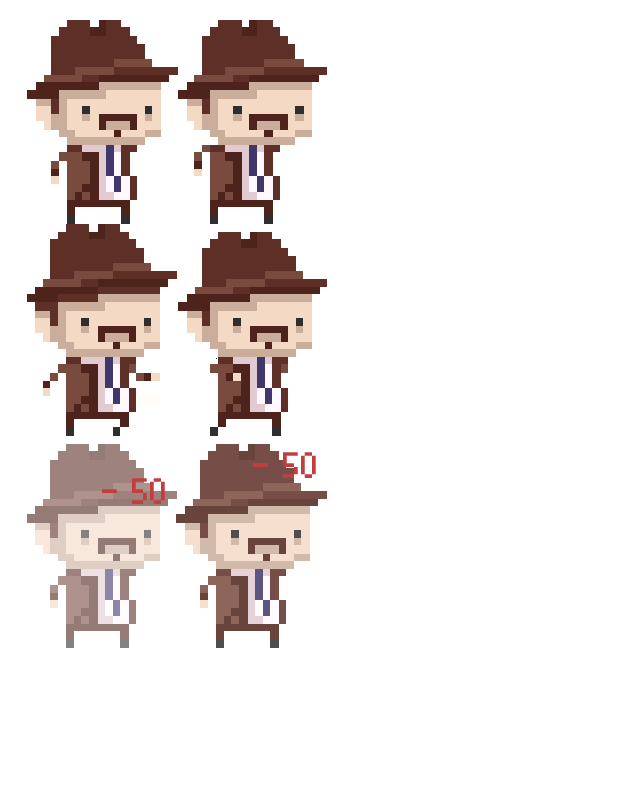
<style>
.page{position:relative;width:640px;height:800px;background:#ffffff}
.page>*{position:absolute;margin:0}
.t1{font:48px "Pixelade";color:#c23d3d;text-transform:uppercase}
</style>
<div class="page">
<p class="t1" style="left:253px;top:452px;width:63px;height:26px">- 50</p>
<p class="t1" style="left:102px;top:478px;width:63px;height:26px">- 50</p>
</div>
